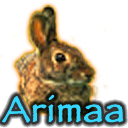
<style>
.page{position:relative;width:128px;height:128px;background:#ffffff}
.page>*{position:absolute;margin:0}
.t1{font:36px "Papyrus";letter-spacing:0.025em;color:#36d7ff;font-weight:bold}
</style>
<div class="page">
<p class="t1" style="left:2px;top:94px;width:122px;height:29px">Arimaa</p>
</div>
